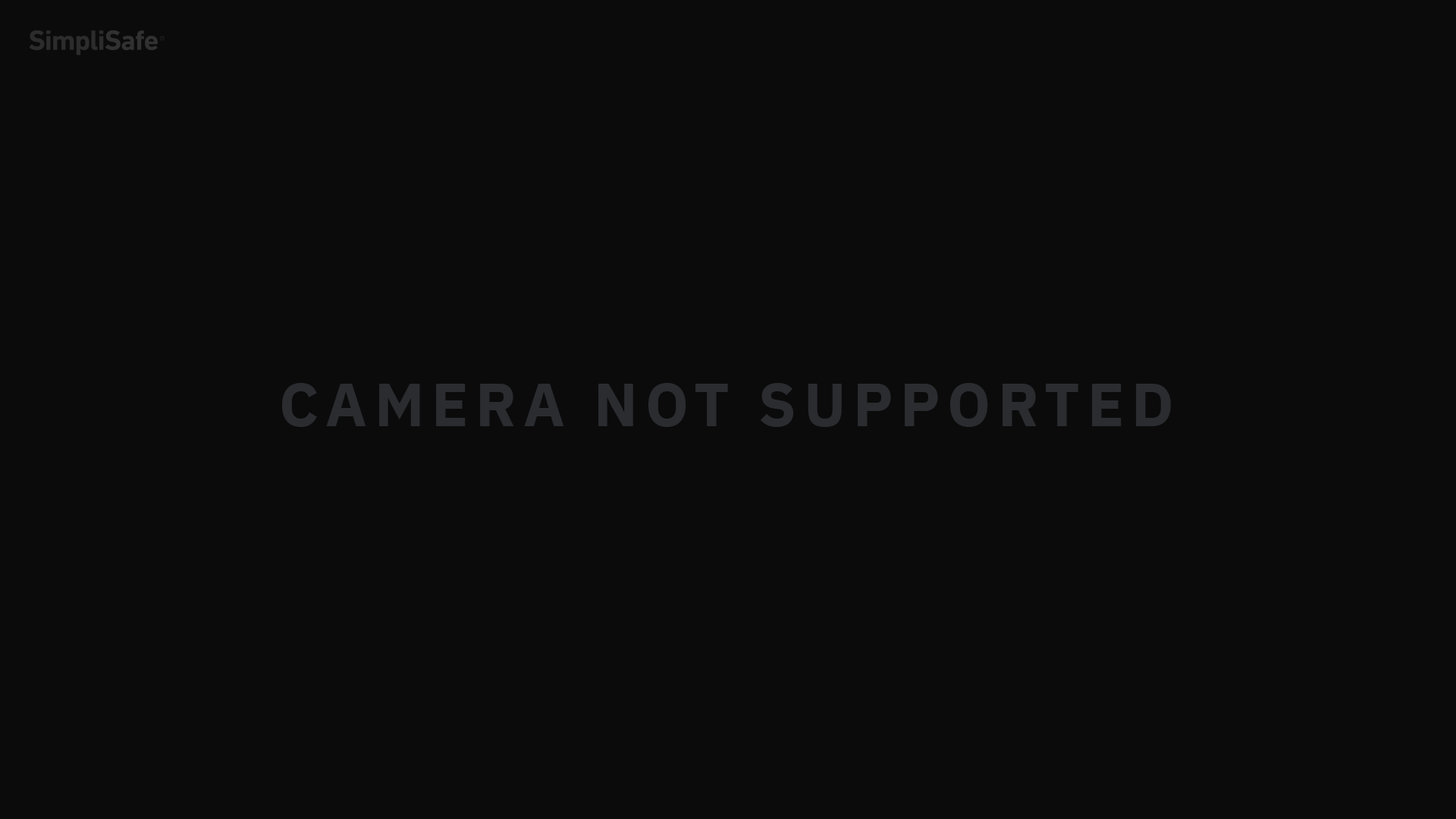
<style>
.page{position:relative;width:1456px;height:819px;background:#0b0b0b}
.page>*{position:absolute;margin:0}
.t1{font:60.7px "IBMPlexSans-Bold";letter-spacing:0.12em;color:#2a2c30;text-transform:uppercase}
</style>
<div class="page">
<p class="t1" style="left:282px;top:383px;width:889px;height:44px">CAMERA NOT SUPPORTED</p>
</div>
